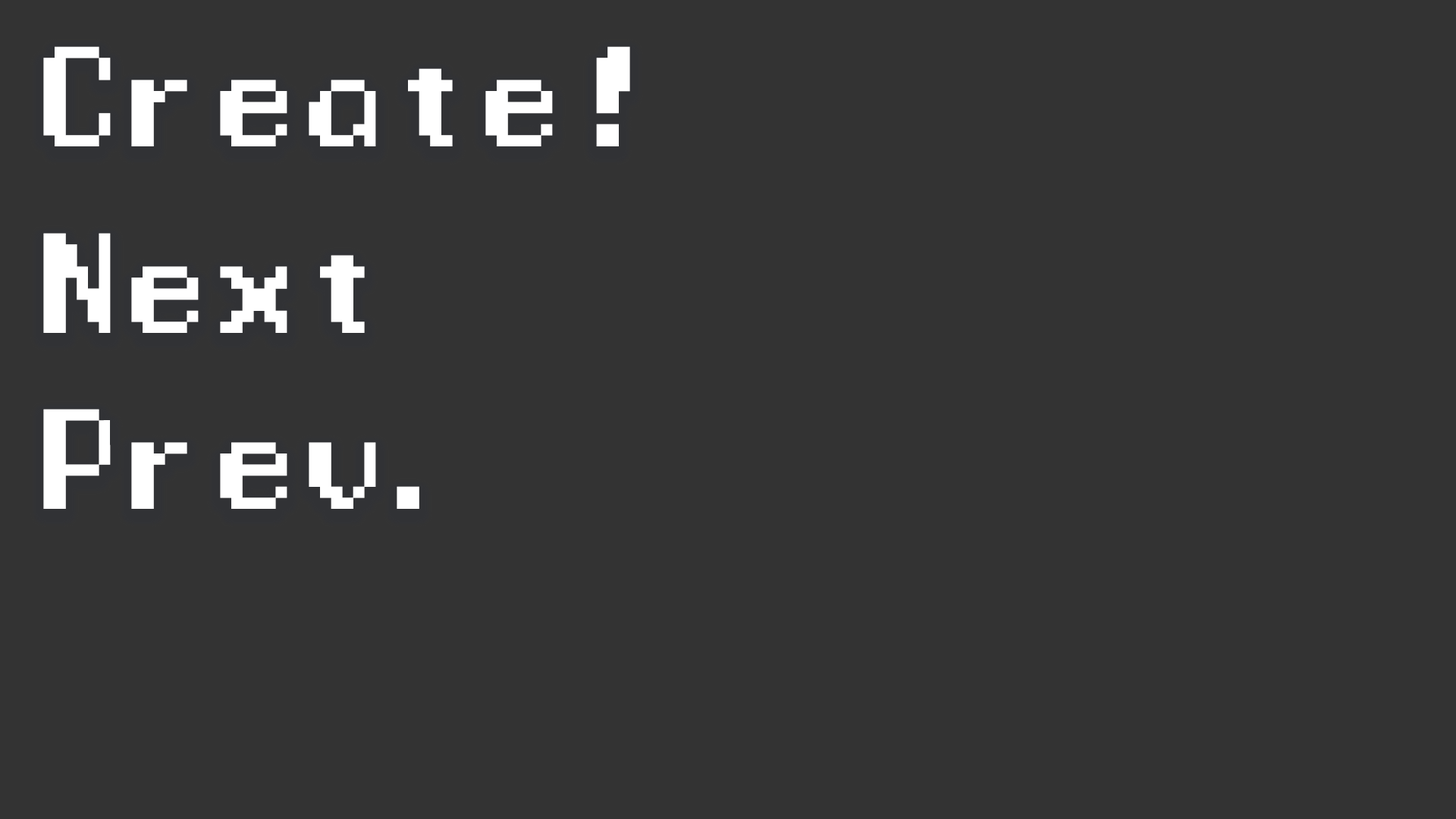
<style>
.page{position:relative;width:1456px;height:819px;background:#333333}
.page>*{position:absolute;margin:0}
.t1{font:132.7px "ManaspaceReg";color:#ffffff}
</style>
<div class="page">
<p class="t1" style="left:43px;top:46px;width:587px;height:100px">Create!</p>
<p class="t1" style="left:43px;top:233px;width:322px;height:100px">Next</p>
<p class="t1" style="left:43px;top:409px;width:376px;height:100px">Prev.</p>
</div>
